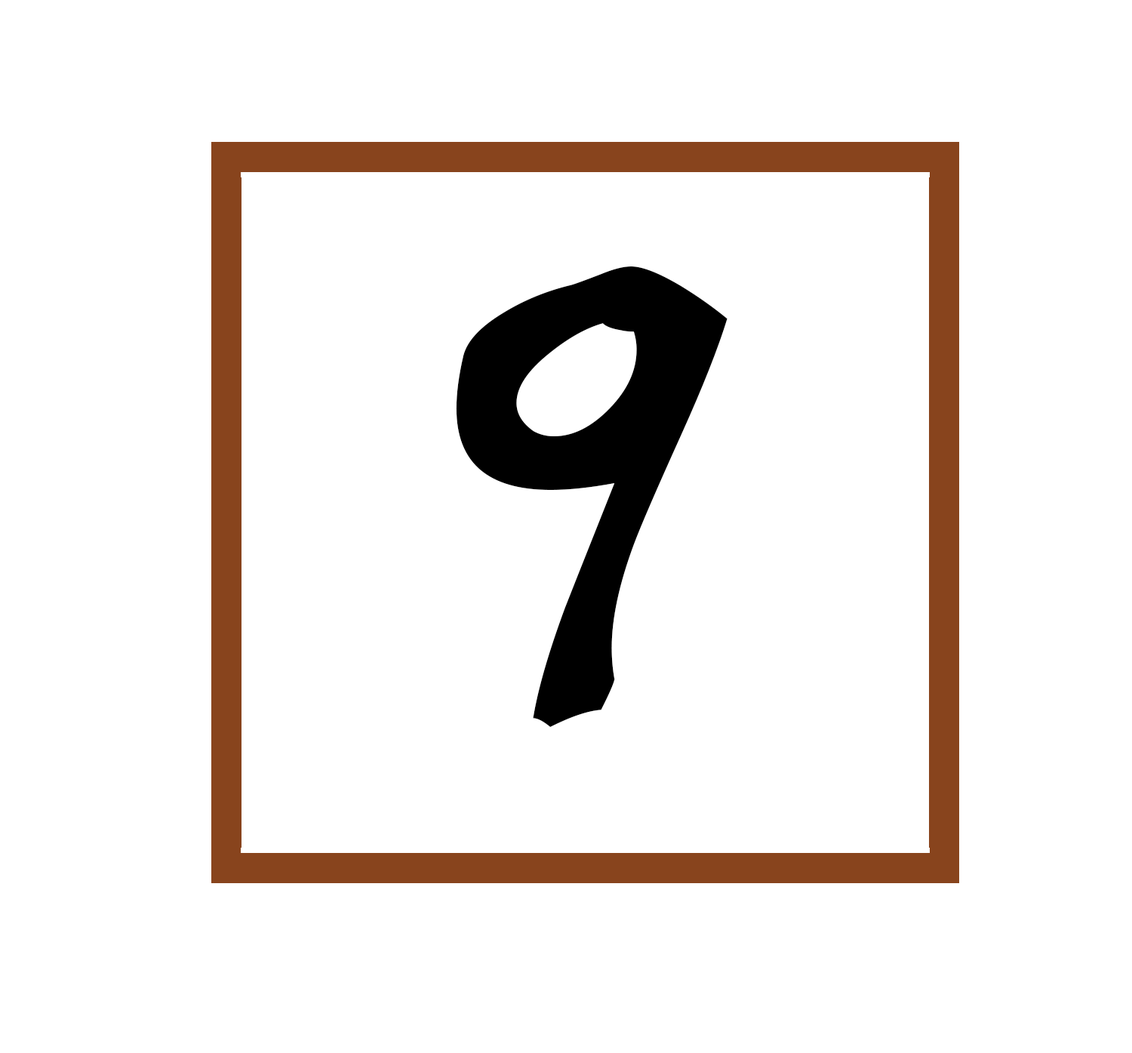
<style>
.page{position:relative;width:1132px;height:1053px;background:#ffffff}
.page>*{position:absolute;margin:0}
.t1{font:462.1px "Yearsupplyoffairycakes";color:#000000}
</style>
<div class="page">
<p class="t1" style="left:456px;top:266px;width:272px;height:461px">9</p>
</div>
